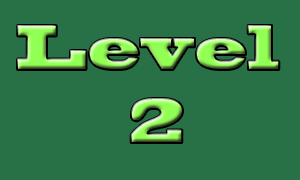
<style>
.page{position:relative;width:300px;height:180px;background:#287146}
.page>*{position:absolute;margin:0}
.t1{font:60.4px "BlackoakStd";scale:0.66 1}
</style>
<div class="page">
<p class="t1" style="left:17px;top:25px;width:263px;height:118px;text-align:center">Level <br>2</p>
</div>
